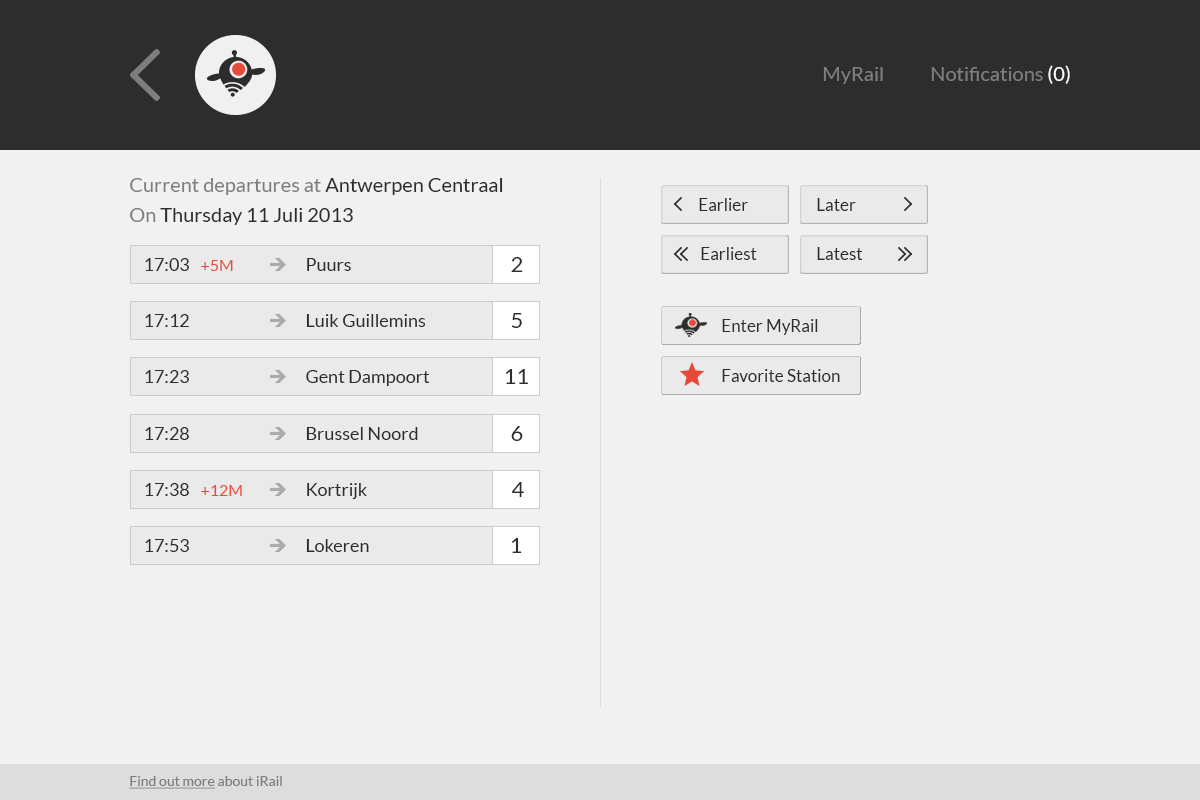
<style>
.page{position:relative;width:1200px;height:800px;background:#f1f1f1}
.page>*{position:absolute;margin:0}
.t1{font:20px "Lato-Regular";color:#7e7e7e}
.t2{font:20px "Lato-Regular";color:#ffffff}
.t3{font:20px/30px "Lato-Regular";color:#7e7e7e}
.t4{font:20px/30px "Lato-Regular";color:#2d2d2d}
.t5{font:17px "Lato-Regular";color:#2d2d2d}
.t6{font:22px "Lato-Regular";color:#2d2d2d}
.t7{font:18px "Lato-Regular";color:#2d2d2d}
.t8{font:16px "Lato-Regular";color:#e74b3b}
.t9{font:14px "Lato-Regular";color:#7e7e7e;text-decoration:underline}
.t10{font:14px "Lato-Regular";color:#7e7e7e}
</style>
<div class="page">
<p class="t1" style="left:931px;top:65px;width:139px;height:19px">Notifications <span class="t2">(0)</span></p>
<p class="t1" style="left:823px;top:67px;width:60px;height:17px">MyRail</p>
<p class="t3" style="left:130px;top:178px;width:373px;height:47px">Current departures at <span class="t4">Antwerpen Centraal<br></span>On <span class="t4">Thursday 11 Juli 2013</span></p>
<p class="t5" style="left:699px;top:198px;width:49px;height:13px">Earlier</p>
<p class="t5" style="left:817px;top:198px;width:39px;height:13px">Later</p>
<p class="t6" style="left:511px;top:257px;width:12px;height:15px">2</p>
<p class="t5" style="left:701px;top:247px;width:56px;height:13px">Earliest</p>
<p class="t5" style="left:817px;top:247px;width:46px;height:13px">Latest</p>
<p class="t7" style="left:145px;top:258px;width:44px;height:13px">17:03</p>
<p class="t8" style="left:201px;top:260px;width:32px;height:11px">+5M</p>
<p class="t7" style="left:307px;top:258px;width:44px;height:13px">Puurs</p>
<p class="t7" style="left:145px;top:314px;width:44px;height:13px">17:12</p>
<p class="t7" style="left:306px;top:314px;width:120px;height:13px">Luik Guillemins</p>
<p class="t6" style="left:511px;top:313px;width:11px;height:15px">5</p>
<p class="t5" style="left:722px;top:319px;width:96px;height:16px">Enter MyRail</p>
<p class="t7" style="left:145px;top:370px;width:44px;height:13px">17:23</p>
<p class="t7" style="left:306px;top:370px;width:124px;height:16px">Gent Dampoort</p>
<p class="t6" style="left:505px;top:369px;width:23px;height:15px">11</p>
<p class="t5" style="left:722px;top:369px;width:118px;height:13px">Favorite Station</p>
<p class="t7" style="left:145px;top:427px;width:44px;height:13px">17:28</p>
<p class="t7" style="left:306px;top:427px;width:112px;height:13px">Brussel Noord</p>
<p class="t6" style="left:511px;top:426px;width:12px;height:15px">6</p>
<p class="t7" style="left:145px;top:483px;width:44px;height:13px">17:38</p>
<p class="t8" style="left:201px;top:485px;width:41px;height:11px">+12M</p>
<p class="t7" style="left:307px;top:483px;width:60px;height:16px">Kortrijk</p>
<p class="t6" style="left:512px;top:482px;width:12px;height:15px">4</p>
<p class="t7" style="left:145px;top:539px;width:44px;height:13px">17:53</p>
<p class="t7" style="left:306px;top:539px;width:63px;height:13px">Lokeren</p>
<p class="t6" style="left:511px;top:538px;width:11px;height:15px">1</p>
<p class="t9" style="left:129px;top:776px;width:153px;height:13px">Find out more<span class="t10"> about iRail</span></p>
</div>
